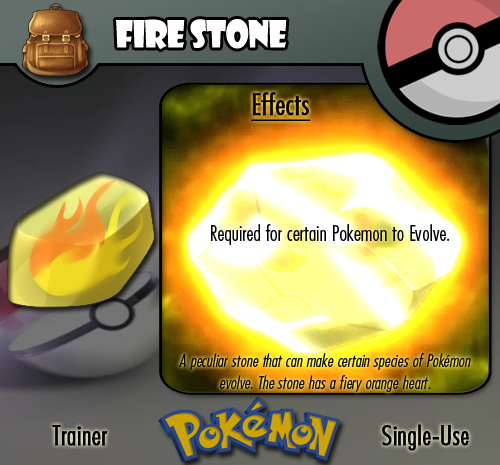
<style>
.page{position:relative;width:500px;height:465px}
.page>*{position:absolute;margin:0}
.t1{font:36.7px "ShowcardGothic-Reg";letter-spacing:-0.025em;color:#ffffff;scale:0.91 1}
.t2{font:22.2px "FuturaCondensedBQ-Light";color:#020202}
.t3{font:27.8px "FuturaCondensedBQ-Light";color:#020202;font-weight:bold}
.t4{font:30.6px "FuturaCondensedBQ-Light";color:#020202;font-weight:bold;text-decoration:underline}
.t5{font:18.1px "FuturaCondensedBQ-Light";color:#010101;font-style:italic}
.t6{font:27.8px "FuturaCondensedBQ-Light";color:#010101;font-weight:bold}
</style>
<div class="page">
<p class="t1" style="left:116px;top:19px;width:171px;height:31px">Fire Stone</p>
<p class="t2" style="left:211px;top:92px;width:239px;height:153px"><span class="t3">  </span><span class="t4">Effects<br><br><br><br></span>Required for certain Pokemon to Evolve.</p>
<p class="t5" style="left:179px;top:353px;width:292px;height:39px;text-align:center">A peculiar stone that can make certain species of Pokémon evolve. The stone has a fiery orange heart.</p>
<p class="t6" style="left:52px;top:425px;width:55px;height:21px">Trainer</p>
<p class="t6" style="left:382px;top:424px;width:87px;height:27px">Single-Use</p>
</div>
